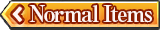
<style>
.page{position:relative;width:160px;height:30px}
.page>*{position:absolute;margin:0}
.t1{font:22px "RyuminPro-ExBold";letter-spacing:-0.08em;color:#fff6f3}
</style>
<div class="page">
<p class="t1" style="left:29px;top:5px;width:123px;height:18px">Normal Items</p>
</div>
